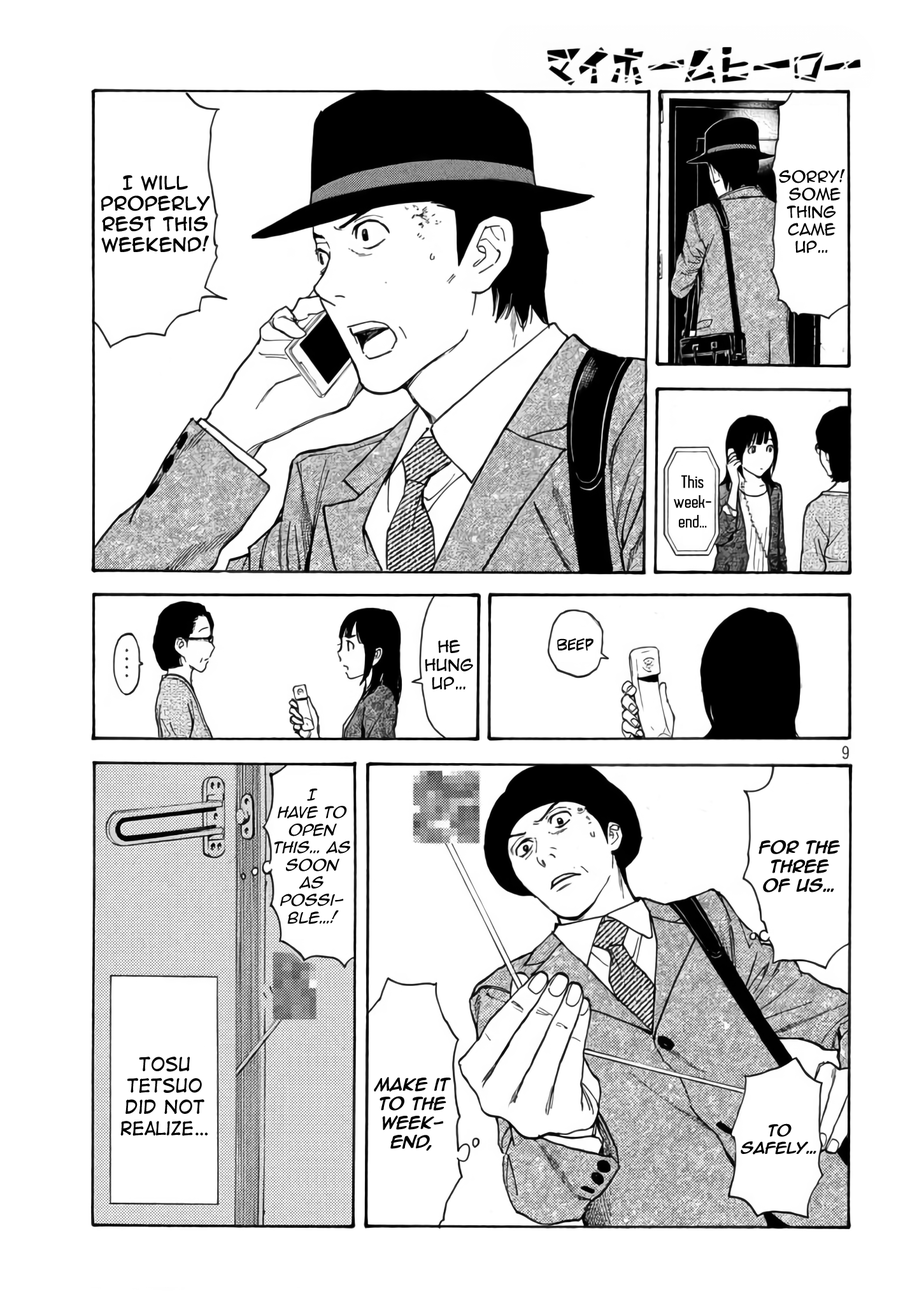
<style>
.page{position:relative;width:917px;height:1301px;background:#ffffff}
.page>*{position:absolute;margin:0}
.t1{font:14.6px "AnimeAce2.0BB";color:#020202}
.t2{font:17.2px "AnimeAce2.0BB";color:#020202;font-weight:bold}
.t3{font:16.5px "AutobusBold";color:#020202}
.t4{font:15.3px "AnimeAce2.0BB";color:#020202}
.t5{font:15.3px "AdamWarrenpro";color:#030303}
.t6{font:14.6px "AnimeAce2.0BB-Italic";color:#020202}
.t7{font:15.9px "AnimeAce2.0BB-Italic";color:#020202;font-weight:bold}
.t8{font:17.8px "DigitalStrip";color:#030303}
.t9{font:14.6px "AnimeAce2.0BB-Italic";color:#020202;font-weight:bold}
</style>
<div class="page">
<p class="t1" style="left:778px;top:169px;width:67px;height:84px;text-align:center">Sorry!<br> some  thing came up…</p>
<p class="t2" style="left:101px;top:175px;width:109px;height:78px;text-align:center">I will properly rest this weekend!</p>
<p class="t3" style="left:673px;top:475px;width:38px;height:53px;text-align:center">This weekend…</p>
<p class="t4" style="left:425px;top:640px;width:48px;height:50px;text-align:center">He hung up…</p>
<p class="t5" style="left:557px;top:638px;width:36px;height:13px">beep</p>
<p class="t6" style="left:274px;top:788px;width:76px;height:136px;text-align:center">I <br>have to open this… as <br>soon as <br>possible…!</p>
<p class="t7" style="left:758px;top:840px;width:82px;height:52px;text-align:center">For the three of us…</p>
<p class="t8" style="left:120px;top:1057px;width:87px;height:79px;text-align:center">Tosu Tetsuo did not realize…</p>
<p class="t7" style="left:374px;top:1077px;width:77px;height:74px;text-align:center">Make it to the weekend,</p>
<p class="t9" style="left:740px;top:1123px;width:76px;height:32px;text-align:center">To safely…</p>
</div>
